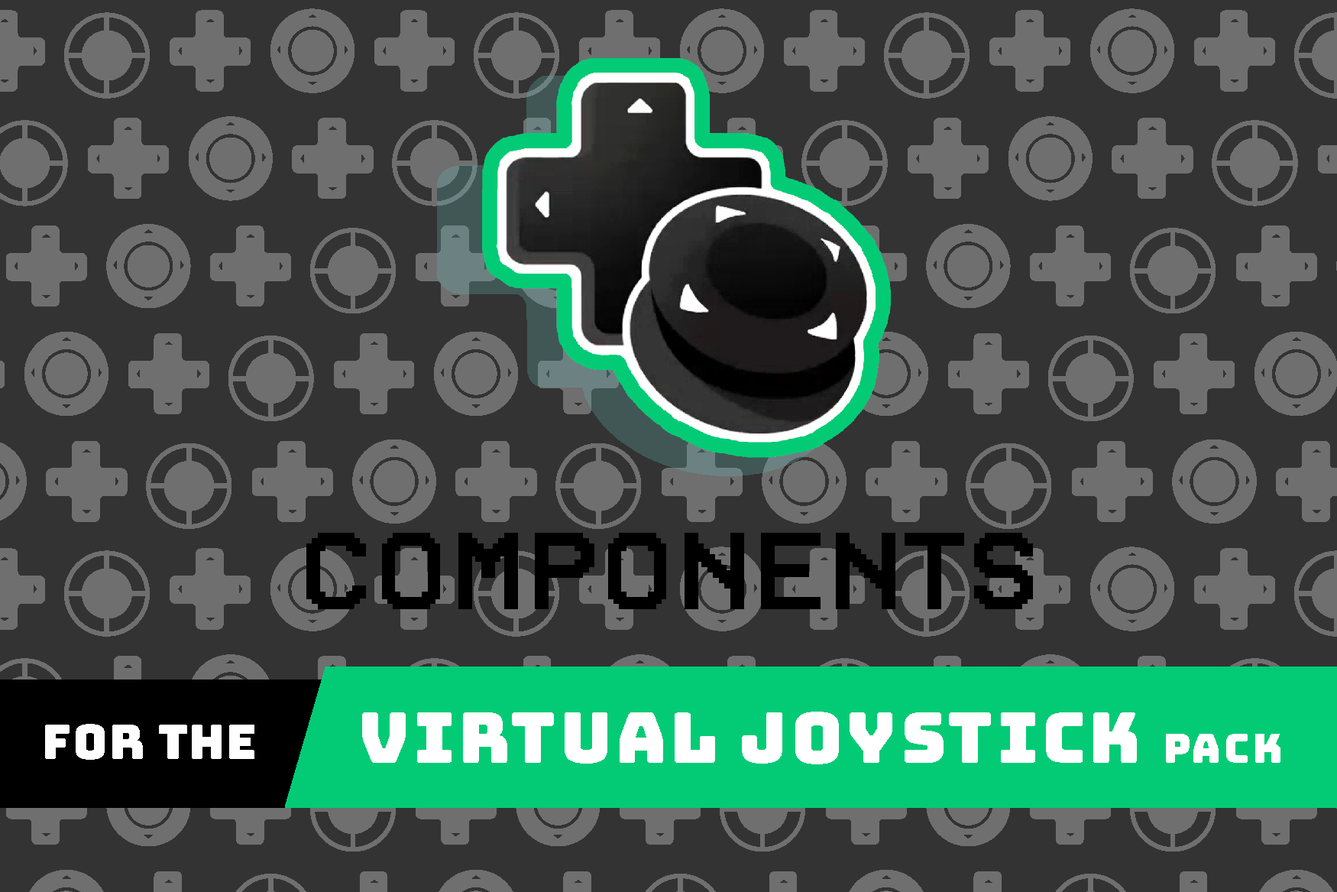
<style>
.page{position:relative;width:1337px;height:892px;background:#333333}
.page>*{position:absolute;margin:0}
.t1{font:69.8px "Bungee-Regular";letter-spacing:0.05em;color:#ffffff}
.t2{font:40.7px "Bungee-Regular";letter-spacing:0.05em;color:#ffffff}
.t3{font:47.6px "Bungee-Regular";letter-spacing:0.05em;color:#ffffff}
</style>
<div class="page">
<p class="t1" style="left:362px;top:711px;width:919px;height:53px">VIRTUAL JOYSTICK <span class="t2">PACK</span></p>
<p class="t3" style="left:45px;top:724px;width:209px;height:36px">FOR THE</p>
</div>
